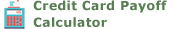
<style>
.page{position:relative;width:177px;height:29px;background:#ffffff}
.page>*{position:absolute;margin:0}
.t1{font:12.5px/16.7px "Verdana-Bold";letter-spacing:0.025em;color:#587d52}
</style>
<div class="page">
<p class="t1" style="left:33px;top:0px;width:134px;height:27px">Credit Card Payoff <br>Calculator</p>
</div>
